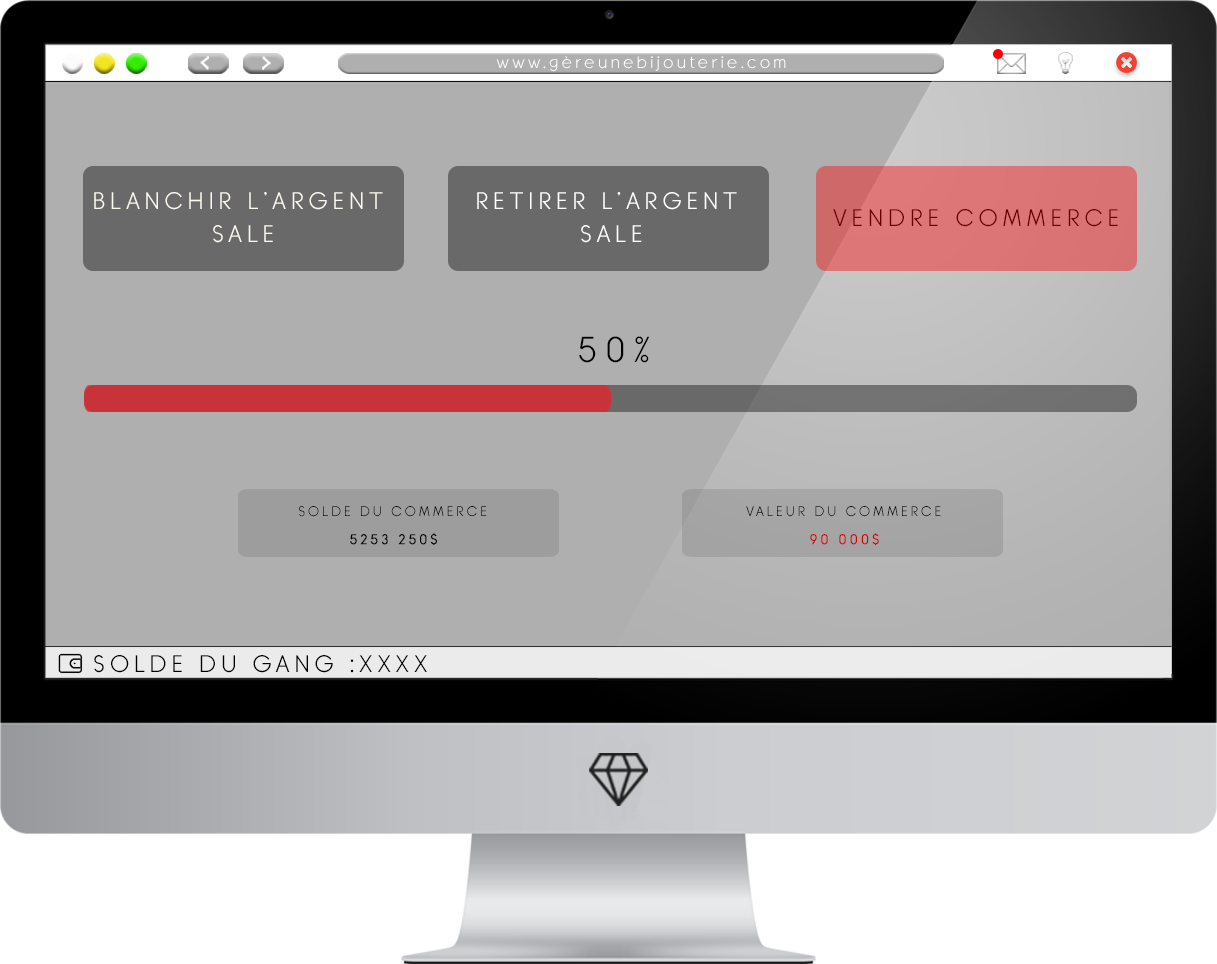
<style>
.page{position:relative;width:1217px;height:964px;background:#afafaf}
.page>*{position:absolute;margin:0}
.t1{font:16.4px "BanksMilesSingleLine";letter-spacing:0.2em;color:#ffffff}
.t2{font:24px/32px "BanksMilesSingleLine";letter-spacing:0.2em;color:#fbf8ee}
.t3{font:24px/32px "BanksMilesSingleLine";letter-spacing:0.2em;color:#ffffff}
.t4{font:24px "BanksMilesSingleLine";letter-spacing:0.2em;color:#660000}
.t5{font:36px "BanksMilesSingleLine";letter-spacing:0.2em;color:#000000}
.t6{font:14px "BanksMilesSingleLine";letter-spacing:0.2em;color:#000000}
.t7{font:14px "BanksMilesSingleLine";letter-spacing:0.2em;color:#000000;font-weight:bold}
.t8{font:14px "BanksMilesSingleLine";letter-spacing:0.2em;color:#d90000;font-weight:bold}
.t9{font:24px "BanksMilesSingleLine";letter-spacing:0.2em;color:#000000}
</style>
<div class="page">
<p class="t1" style="left:496px;top:56px;width:290px;height:16px">www.gèreunebijouterie.com</p>
<p class="t2" style="left:94px;top:192px;width:289px;height:51px;text-align:center">BLANCHIR L’ARGENT <br>SALE</p>
<p class="t3" style="left:477px;top:192px;width:260px;height:51px;text-align:center">RETIRER L’ARGENT <br>SALE</p>
<p class="t4" style="left:833px;top:209px;width:285px;height:18px">VENDRE COMMERCE</p>
<p class="t5" style="left:579px;top:336px;width:71px;height:27px">50%</p>
<p class="t6" style="left:299px;top:506px;width:188px;height:11px">SOLDE DU COMMERCE</p>
<p class="t6" style="left:746px;top:506px;width:195px;height:11px">VALEUR DU COMMERCE</p>
<p class="t7" style="left:350px;top:533px;width:87px;height:12px">5253 250$</p>
<p class="t8" style="left:810px;top:533px;width:69px;height:12px">90 000$</p>
<p class="t9" style="left:94px;top:655px;width:333px;height:18px">SOLDE DU GANG :XXXX</p>
</div>
